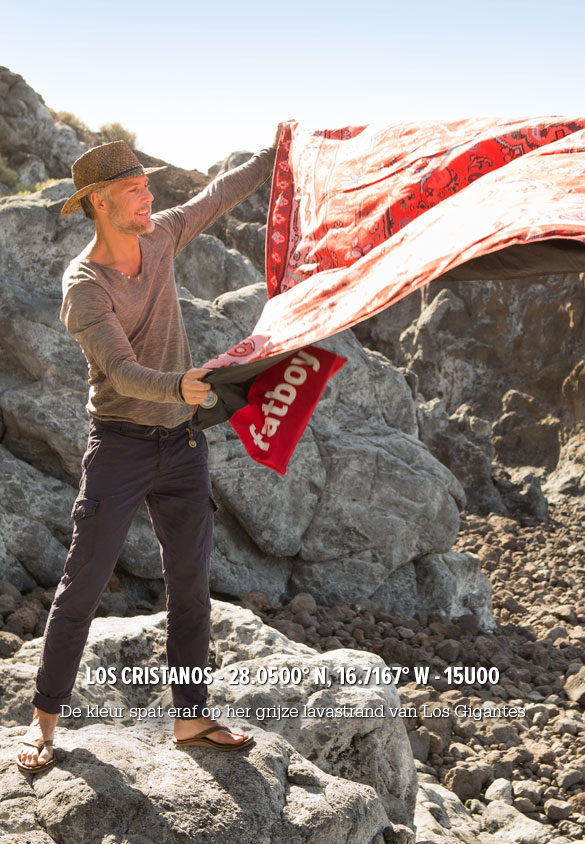
<style>
.page{position:relative;width:585px;height:844px}
.page>*{position:absolute;margin:0}
.t1{font:18.3px/16.3px "SerifaStd-Light";color:#ffffff}
.t2{font:25.5px/16.3px "ProximaNovaExCn-Bold";color:#ffffff}
</style>
<div class="page">
<p class="t1" style="left:60px;top:667px;width:465px;height:53px;text-align:center"><span class="t2">LOS CRISTANOS - 28.0500° N, 16.7167° W - 15U00<br><br></span>De kleur spat eraf op her grijze lavastrand van Los Gigantes</p>
</div>
